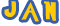
<style>
.page{position:relative;width:60px;height:26px;background:#ffffff}
.page>*{position:absolute;margin:0}
.t1{font:16.7px "PokemonSolidNormal";color:#ffcb05}
</style>
<div class="page">
<p class="t1" style="left:4px;top:1px;width:12px;height:16px">J</p>
<p class="t1" style="left:21px;top:2px;width:18px;height:20px">A</p>
<p class="t1" style="left:44px;top:1px;width:12px;height:20px">N</p>
</div>
